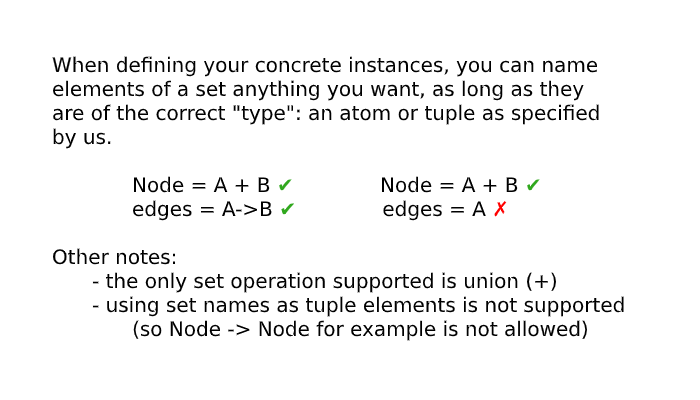
<style>
.page{position:relative;width:700px;height:400px;background:#ffffff}
.page>*{position:absolute;margin:0}
.t1{font:20px "DejaVuSans";color:#000000}
.t2{font:20px "DejaVuSans";color:#31a81e}
.t3{font:20px "DejaVuSans";color:#ff0000}
</style>
<div class="page">
<p class="t1" style="left:52px;top:56px;width:572px;height:285px">When defining your concrete instances, you can name<br>elements of a set anything you want, as long as they <br>are of the correct "type": an atom or tuple as specified<br>by us.<br><br>  Node = A + B <span class="t2">✔   </span>Node = A + B <span class="t2">✔<br>  </span>edges = A-&gt;B <span class="t2">✔   </span>edges = A <span class="t3">✗<br><br></span>Other notes: <br> - the only set operation supported is union (+)<br> - using set names as tuple elements is not supported<br>  (so Node -&gt; Node for example is not allowed)</p>
</div>
